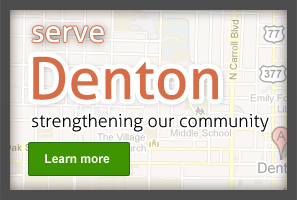
<style>
.page{position:relative;width:297px;height:200px}
.page>*{position:absolute;margin:0}
.t1{font:30px "Aller";color:#ffffff}
.t2{font:58px "Aller";color:#d76d46}
.t3{font:18px "Aller-Light";color:#000000}
.t4{font:12px "Arial-BoldMT";color:#ffffff}
</style>
<div class="page">
<p class="t1" style="left:32px;top:26px;width:72px;height:17px">serve</p>
<p class="t2" style="left:33px;top:56px;width:185px;height:44px">Denton</p>
<p class="t3" style="left:32px;top:113px;width:237px;height:19px">strengthening our community</p>
<p class="t4" style="left:45px;top:154px;width:65px;height:9px">Learn more</p>
</div>
